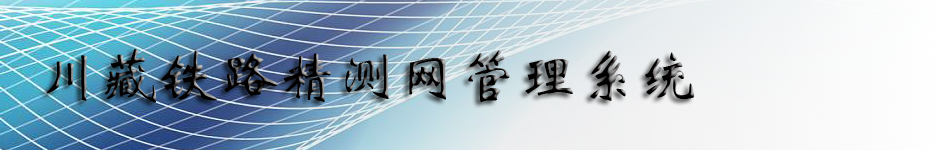
<style>
.page{position:relative;width:949px;height:150px}
.page>*{position:absolute;margin:0}
.t1{font:60px "STXinwei";color:#060000}
</style>
<div class="page">
<p class="t1" style="left:46px;top:49px;width:649px;height:54px">川藏铁路精测网管理系统</p>
</div>
